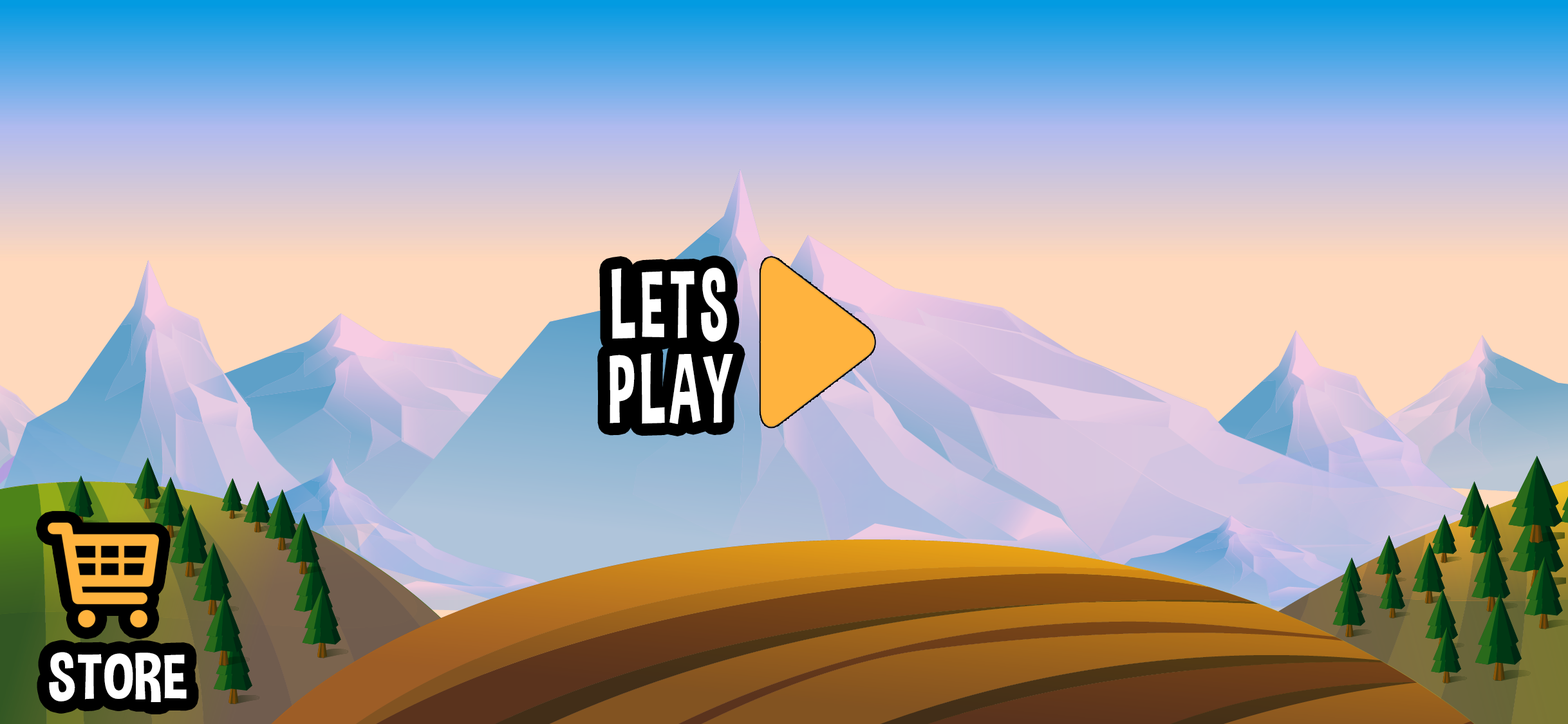
<style>
.page{position:relative;width:1568px;height:724px}
.page>*{position:absolute;margin:0}
.t1{font:96.6px/84.9px "DimboRegular";letter-spacing:0.06em;color:#ffffff;scale:0.67 1}
.t2{font:64.4px "DimboRegular";letter-spacing:0.01em;color:#ffffff}
</style>
<div class="page">
<p class="t1" style="left:610px;top:268px;width:123px;height:156px;text-align:center">LETS<br>PLAY</p>
<p class="t2" style="left:49px;top:652px;width:138px;height:50px">STORE</p>
</div>
